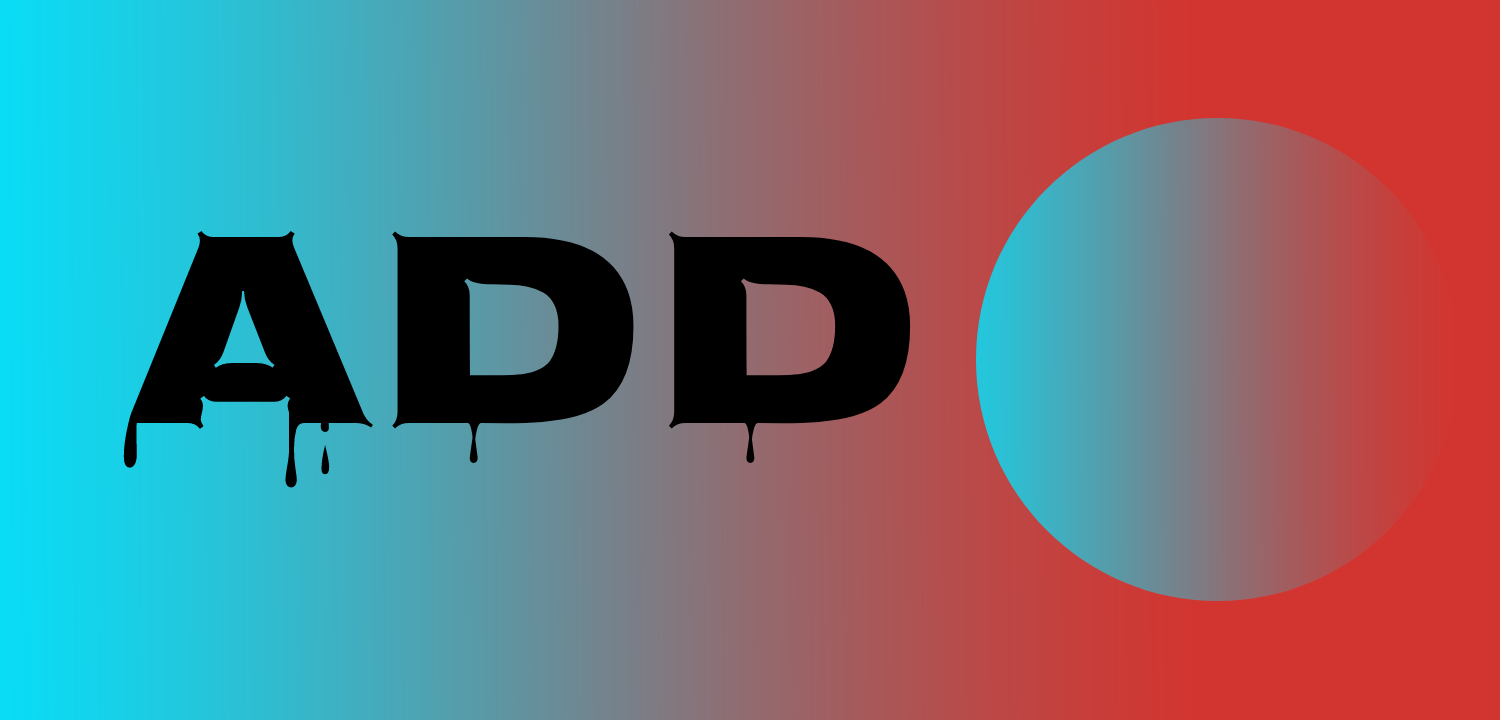
<style>
.page{position:relative;width:1500px;height:720px}
.page>*{position:absolute;margin:0}
.t1{font:285.9px "Nosifer-Regular";color:#000000}
</style>
<div class="page">
<p class="t1" style="left:123px;top:231px;width:788px;height:257px">Add</p>
</div>
